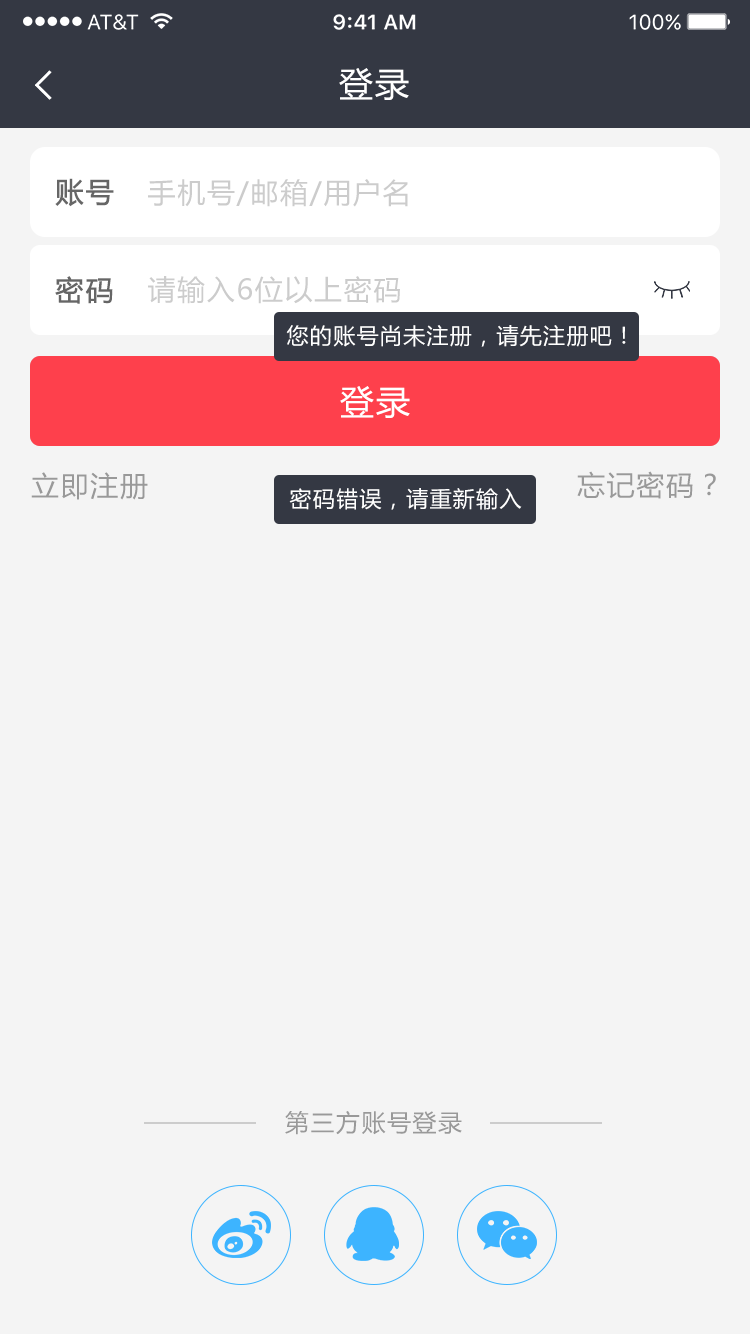
<style>
.page{position:relative;width:750px;height:1334px;background:#f4f4f4}
.page>*{position:absolute;margin:0}
.t1{font:34px "MicrosoftYaHei";letter-spacing:0.06em;color:#ffffff}
.t2{font:28px "MicrosoftYaHei";letter-spacing:0.06em;color:#666666;font-weight:bold}
.t3{font:28px "MicrosoftYaHei";letter-spacing:0.06em;color:#cccccc}
.t4{font:22px "MicrosoftYaHei";letter-spacing:0.06em;color:#ffffff}
.t5{font:28px "MicrosoftYaHei";letter-spacing:0.06em;color:#999999}
.t6{font:24px "MicrosoftYaHei";letter-spacing:0.06em;color:#999999}
</style>
<div class="page">
<p class="t1" style="left:339px;top:68px;width:70px;height:32px">登录</p>
<p class="t2" style="left:55px;top:178px;width:59px;height:29px">账号</p>
<p class="t3" style="left:148px;top:179px;width:260px;height:28px">手机号/邮箱/用户名</p>
<p class="t2" style="left:55px;top:276px;width:58px;height:28px">密码</p>
<p class="t3" style="left:148px;top:276px;width:252px;height:28px">请输入6位以上密码</p>
<p class="t4" style="left:286px;top:325px;width:340px;height:22px">您的账号尚未注册，请先注册吧！</p>
<p class="t1" style="left:340px;top:386px;width:70px;height:32px">登录</p>
<p class="t1" style="left:340px;top:386px;width:70px;height:32px">登录</p>
<p class="t5" style="left:31px;top:472px;width:117px;height:28px">立即注册</p>
<p class="t5" style="left:577px;top:471px;width:139px;height:28px">忘记密码？</p>
<p class="t4" style="left:289px;top:488px;width:233px;height:22px">密码错误，请重新输入</p>
<p class="t6" style="left:285px;top:1111px;width:177px;height:24px">第三方账号登录</p>
</div>
